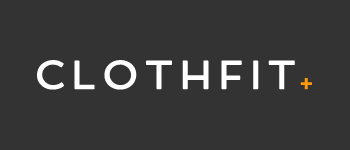
<style>
.page{position:relative;width:350px;height:150px;background:#333333}
.page>*{position:absolute;margin:0}
.t1{font:68.1px "Spinnaker-Regular";letter-spacing:0.15em;color:#ffffff;text-transform:uppercase;font-weight:bold}
.t2{font:39.2px "Spinnaker-Regular";letter-spacing:0.15em;color:#ff990c;text-transform:uppercase;font-weight:bold}
</style>
<div class="page">
<p class="t1" style="left:37px;top:60px;width:258px;height:30px">clothfit</p>
<p class="t2" style="left:300px;top:78px;width:12px;height:12px">+</p>
</div>
